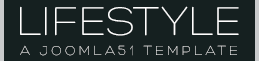
<style>
.page{position:relative;width:259px;height:61px;background:#152020}
.page>*{position:absolute;margin:0}
.t1{font:43.7px "Hero-Light";color:#ffffff;text-transform:uppercase}
.t2{font:14.2px "Hero-Light";letter-spacing:0.2em;text-transform:uppercase}
</style>
<div class="page">
<p class="t1" style="left:20px;top:6px;width:219px;height:30px">Lifestyle</p>
<p class="t2" style="left:20px;top:45px;width:217px;height:11px">A Joomla51 Template</p>
</div>
